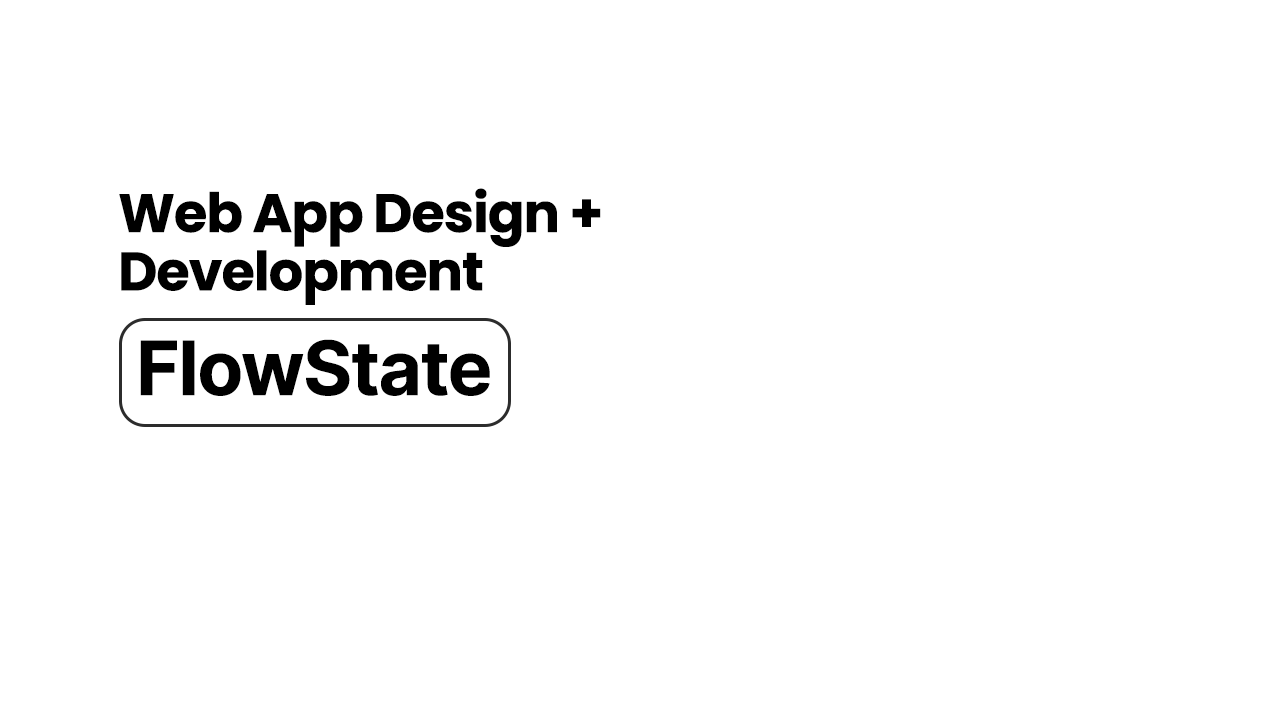
<style>
.page{position:relative;width:1280px;height:720px;background:#ffffff}
.page>*{position:absolute;margin:0}
.t1{font:54.2px/58.3px "Poppins-Bold";letter-spacing:-0.02em;color:#000000}
.t2{font:75px "Inter-Bold";letter-spacing:-0.02em;color:#000000}
</style>
<div class="page">
<p class="t1" style="left:119px;top:188px;width:482px;height:117px">Web App Design + <br>Development</p>
<p class="t2" style="left:140px;top:339px;width:350px;height:57px">FlowState</p>
</div>
